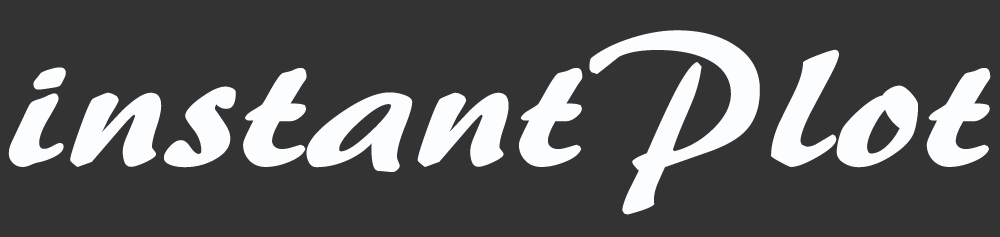
<style>
.page{position:relative;width:1000px;height:237px;background:#333333}
.page>*{position:absolute;margin:0}
.t1{font:194px "ARBERKLEY";color:#fcfdfe;scale:1.18 1}
</style>
<div class="page">
<p class="t1" style="left:8px;top:30px;width:983px;height:185px">instantPlot</p>
</div>
